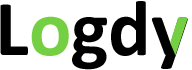
<style>
.page{position:relative;width:192px;height:70px;background:#ffffff}
.page>*{position:absolute;margin:0}
.t1{font:79.5px "Calibri-Bold";color:#000000}
.t2{font:79.5px "Calibri-Bold";color:#74d042}
</style>
<div class="page">
<p class="t1" style="left:0px;top:1px;width:188px;height:69px">L<span class="t2">o</span>gdy</p>
</div>
